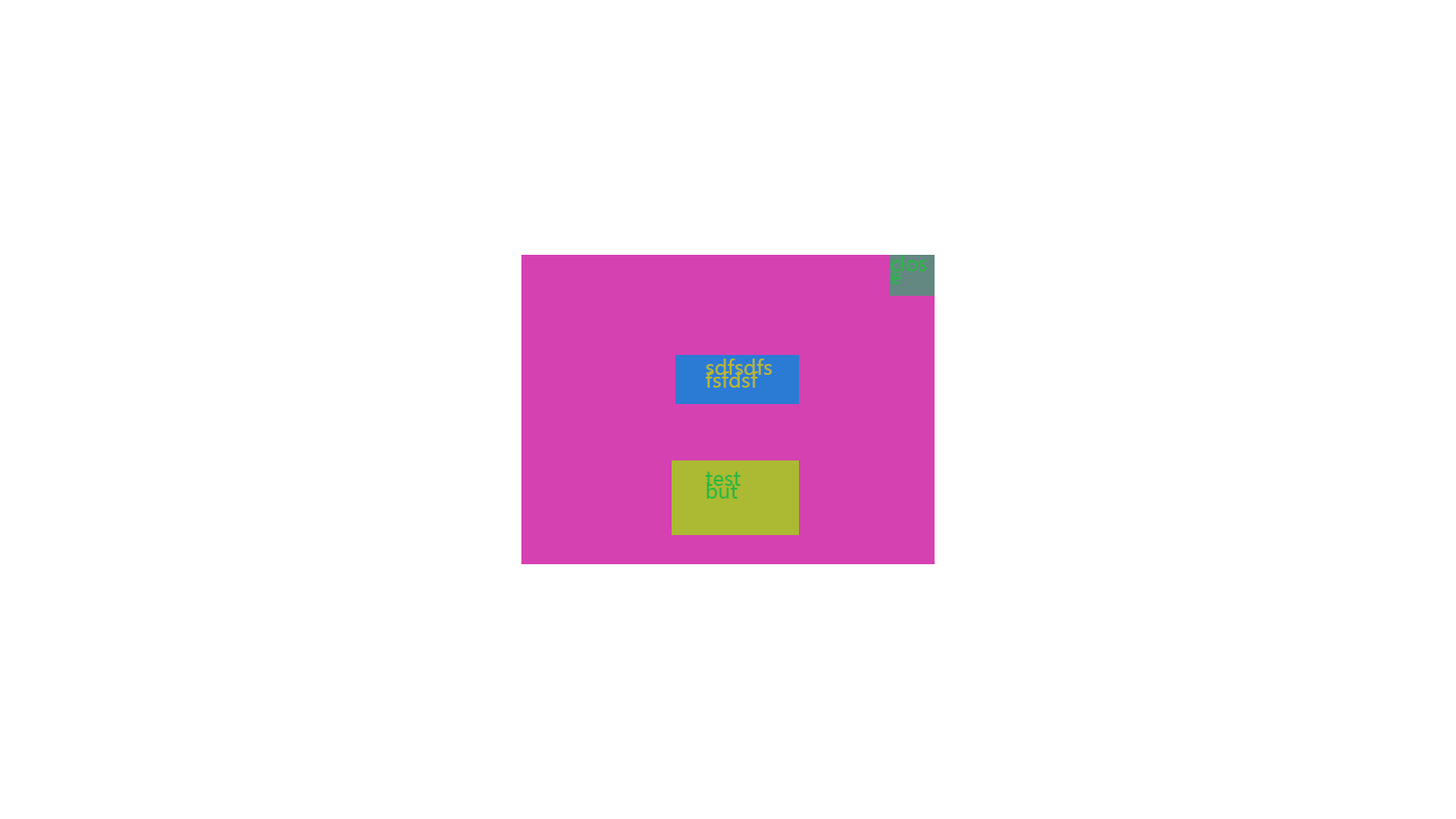
<style>
.page{position:relative;width:1456px;height:819px;background:#ffffff}
.page>*{position:absolute;margin:0}
.t1{font:20px "MicrosoftYaHei";color:#28b743}
.t2{font:20px "MicrosoftYaHei";color:#bbb62d}
</style>
<div class="page">
<p class="t1" style="left:891px;top:255px;width:36px;height:29px">close</p>
<p class="t2" style="left:705px;top:359px;width:68px;height:29px">sdfsdfsfsfdsf</p>
<p class="t1" style="left:705px;top:471px;width:36px;height:28px">testbuton</p>
</div>
